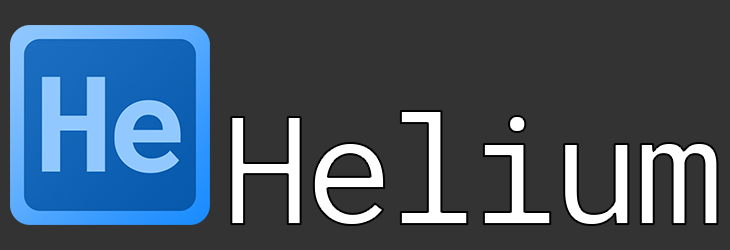
<style>
.page{position:relative;width:730px;height:250px;background:#333333}
.page>*{position:absolute;margin:0}
.t1{font:150px "RobotoMono-Regular";letter-spacing:-0.05em;color:#ffffff}
</style>
<div class="page">
<p class="t1" style="left:231px;top:111px;width:487px;height:114px">Helium</p>
</div>
